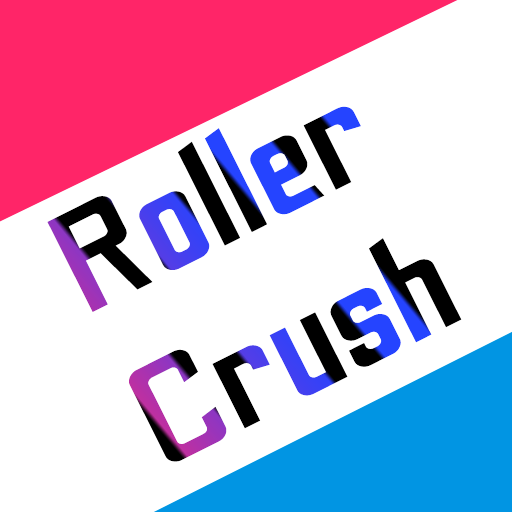
<style>
.page{position:relative;width:512px;height:512px;background:#ffffff}
.page>*{position:absolute;margin:0}
.t1{font:143.6px "OdibeeSans-Regular";scale:1.25 1}
</style>
<div class="page">
<p class="t1" style="left:47px;top:106px;width:415px;height:356px;rotate:-27deg">Roller<br>Crush</p>
</div>
